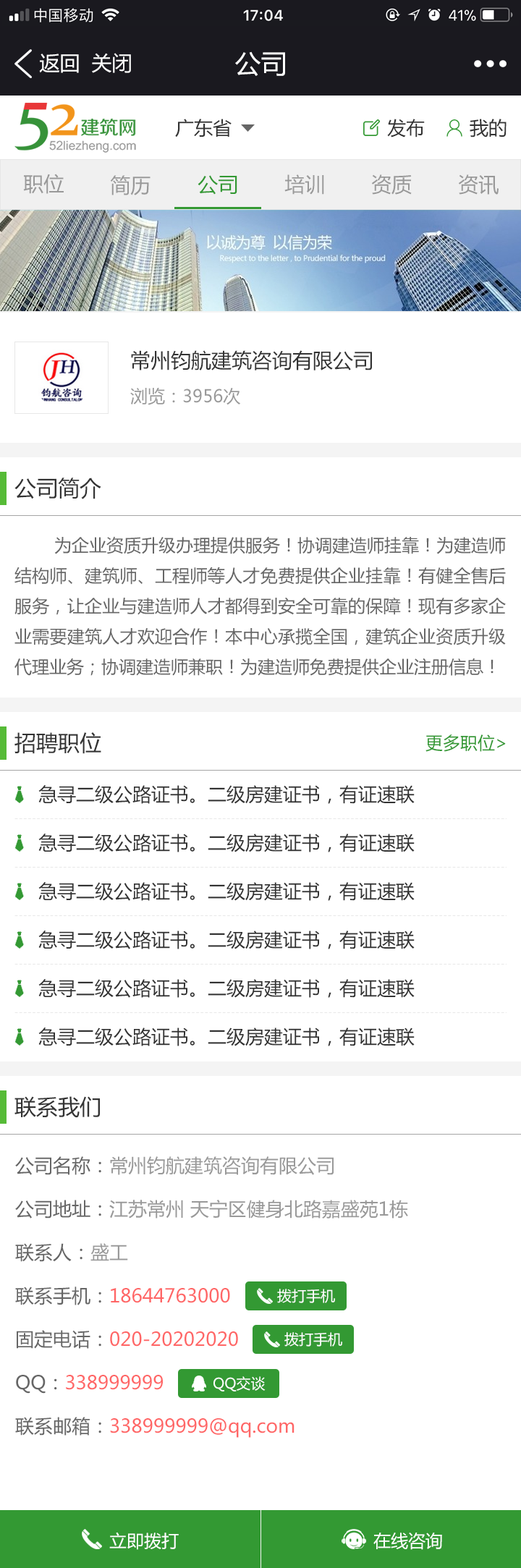
<style>
.page{position:relative;width:521px;height:1568px;background:#ffffff}
.page>*{position:absolute;margin:0}
.t1{font:20.3px "MicrosoftYaHei";color:#ffffff}
.t2{font:26px "MicrosoftYaHei";color:#ffffff}
.t3{font:18.8px "MicrosoftYaHei";color:#333333}
.t4{font:20.3px "MicrosoftYaHei";color:#999999}
.t5{font:20.3px "MicrosoftYaHei";color:#339933}
.t6{font:20.3px "MicrosoftYaHei";color:#333333}
.t7{font:17.4px "MicrosoftYaHei";color:#999999}
.t8{font:21.7px "MicrosoftYaHei";color:#333333}
.t9{font:17.4px "MicrosoftYaHei";color:#666666}
.t10{font:17.4px "MicrosoftYaHei";color:#339933}
.t11{font:18.8px/43.4px "MicrosoftYaHei";color:#999999}
.t12{font:18.8px/43.4px "MicrosoftYaHei";color:#666666}
.t13{font:18.8px/43.4px "MicrosoftYaHei";color:#ff6666}
.t14{font:14.5px "MicrosoftYaHei";color:#ffffff}
.t15{font:17.4px "MicrosoftYaHei";color:#ffffff}
</style>
<div class="page">
<p class="t1" style="left:39px;top:54px;width:40px;height:19px">返回</p>
<p class="t1" style="left:92px;top:53px;width:39px;height:20px">关闭</p>
<p class="t2" style="left:235px;top:51px;width:50px;height:25px">公司</p>
<p class="t3" style="left:175px;top:119px;width:57px;height:18px">广东省</p>
<p class="t3" style="left:387px;top:119px;width:38px;height:18px">发布</p>
<p class="t3" style="left:470px;top:119px;width:37px;height:18px">我的</p>
<p class="t4" style="left:23px;top:174px;width:41px;height:20px">职位</p>
<p class="t4" style="left:110px;top:175px;width:41px;height:20px">简历</p>
<p class="t5" style="left:198px;top:175px;width:39px;height:20px">公司</p>
<p class="t4" style="left:284px;top:174px;width:40px;height:21px">培训</p>
<p class="t4" style="left:371px;top:174px;width:41px;height:21px">资质</p>
<p class="t4" style="left:458px;top:174px;width:41px;height:21px">资讯</p>
<p class="t6" style="left:131px;top:350px;width:241px;height:20px">常州钧航建筑咨询有限公司</p>
<p class="t7" style="left:130px;top:388px;width:110px;height:17px">浏览：3956次</p>
<p class="t8" style="left:14px;top:478px;width:87px;height:21px">公司简介</p>
<p class="t9" style="left:14px;top:536px;width:492px;height:140px;text-align:justify">为企业资质升级办理提供服务！协调建造师挂靠！为建造师结构师、建筑师、工程师等人才免费提供企业挂靠！有健全售后服务，让企业与建造师人才都得到安全可靠的保障！现有多家企业需要建筑人才欢迎合作！本中心承揽全国，建筑企业资质升级代理业务；协调建造师兼职！为建造师免费提供企业注册信息！</p>
<p class="t8" style="left:14px;top:732px;width:87px;height:22px">招聘职位</p>
<p class="t10" style="left:425px;top:734px;width:81px;height:18px">更多职位&gt;</p>
<p class="t3" style="left:38px;top:785px;width:377px;height:19px">急寻二级公路证书。二级房建证书，有证速联</p>
<p class="t3" style="left:38px;top:834px;width:377px;height:18px">急寻二级公路证书。二级房建证书，有证速联</p>
<p class="t3" style="left:38px;top:882px;width:377px;height:19px">急寻二级公路证书。二级房建证书，有证速联</p>
<p class="t3" style="left:38px;top:931px;width:377px;height:18px">急寻二级公路证书。二级房建证书，有证速联</p>
<p class="t3" style="left:38px;top:979px;width:377px;height:19px">急寻二级公路证书。二级房建证书，有证速联</p>
<p class="t3" style="left:38px;top:1027px;width:377px;height:19px">急寻二级公路证书。二级房建证书，有证速联</p>
<p class="t8" style="left:14px;top:1096px;width:86px;height:22px">联系我们</p>
<p class="t11" style="left:15px;top:1156px;width:393px;height:282px"><span class="t12">公司名称：</span>常州钧航建筑咨询有限公司<br><span class="t12">公司地址：</span>江苏常州 天宁区健身北路嘉盛苑1栋<br><span class="t12">联系人：</span>盛工<br><span class="t12">联系手机：</span><span class="t13">18644763000<br></span><span class="t12">固定电话：</span><span class="t13">020-20202020<br></span><span class="t12">QQ：</span><span class="t13">338999999<br></span><span class="t12">联系邮箱：</span><span class="t13">338999999@qq.com</span></p>
<p class="t14" style="left:277px;top:1289px;width:58px;height:14px">拨打手机</p>
<p class="t14" style="left:284px;top:1332px;width:58px;height:15px">拨打手机</p>
<p class="t14" style="left:213px;top:1376px;width:53px;height:15px">QQ交谈</p>
<p class="t15" style="left:109px;top:1532px;width:70px;height:18px">立即拨打</p>
<p class="t15" style="left:373px;top:1533px;width:69px;height:17px">在线咨询</p>
</div>
